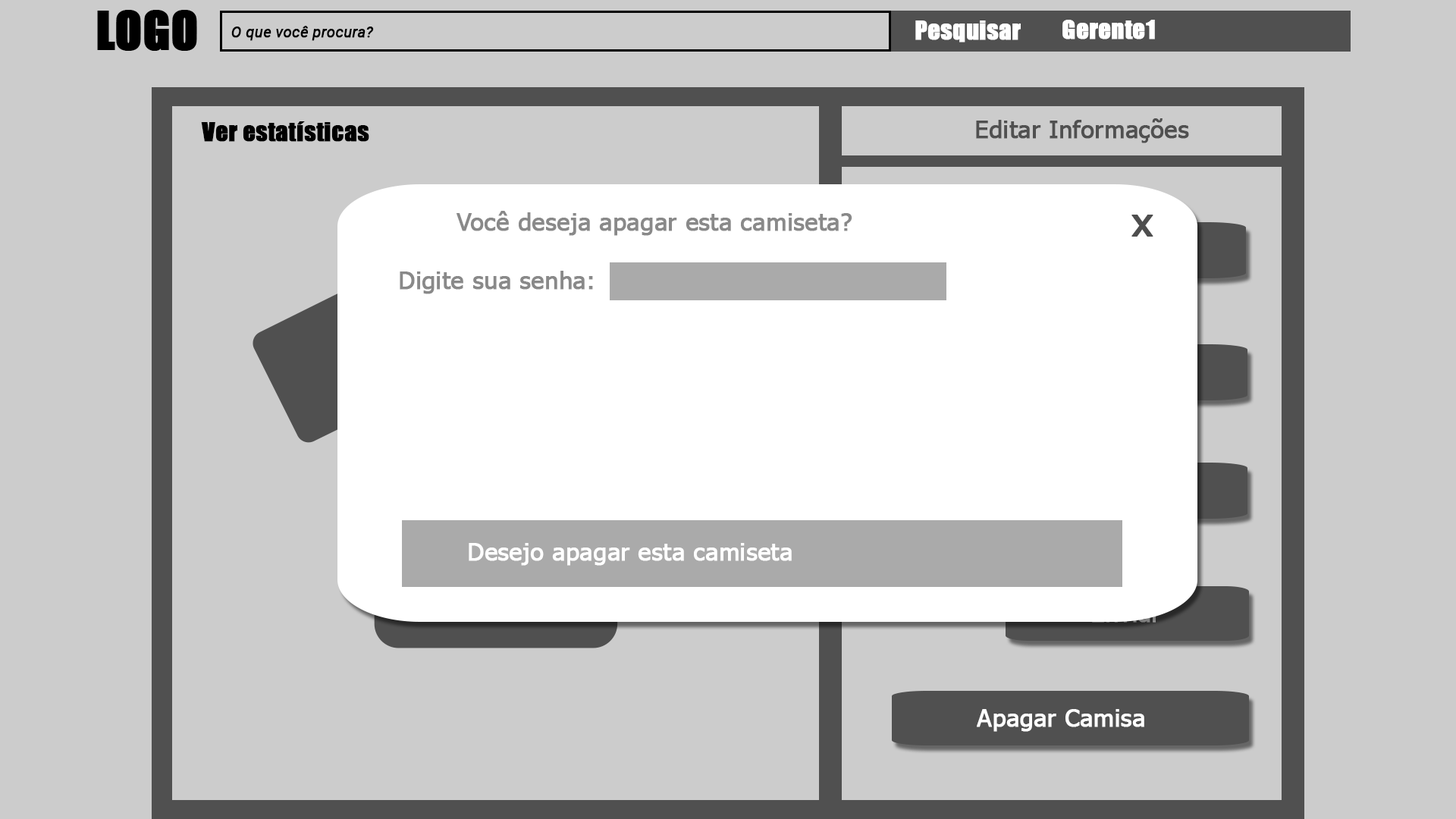
<style>
.page{position:relative;width:1456px;height:819px;background:#cccccc}
.page>*{position:absolute;margin:0}
.t1{font:15.2px "Roboto-Italic";color:#000000;font-weight:bold}
.t2{font:24.3px "Impact";color:#ffffff;font-weight:bold}
.t3{font:24.3px "Impact";color:#000000;font-weight:bold}
.t4{font:24.3px "Tahoma";color:#505050;font-weight:bold}
.t5{font:24.3px "Tahoma";color:#898989;font-weight:bold}
.t6{font:38.8px "Tahoma";color:#4e4e4e;font-weight:bold;scale:1.07 1}
.t7{font:24.3px "Tahoma";color:#ffffff;font-weight:bold}
</style>
<div class="page">
<p class="t1" style="left:231px;top:26px;width:143px;height:15px">O que você procura?</p>
<p class="t2" style="left:915px;top:20px;width:106px;height:22px">Pesquisar</p>
<p class="t2" style="left:1062px;top:20px;width:93px;height:19px">Gerente1</p>
<p class="t3" style="left:201px;top:121px;width:168px;height:21px">Ver estatísticas</p>
<p class="t4" style="left:976px;top:118px;width:213px;height:25px">Editar Informações</p>
<p class="t5" style="left:400px;top:211px;width:452px;height:83px">Você deseja apagar esta camiseta?<br><br>Digite sua senha:</p>
<p class="t6" style="left:1131px;top:215px;width:22px;height:22px">x</p>
<p class="t7" style="left:469px;top:543px;width:323px;height:23px">Desejo apagar esta camiseta</p>
<p class="t7" style="left:977px;top:709px;width:167px;height:23px">Apagar Camisa</p>
</div>
